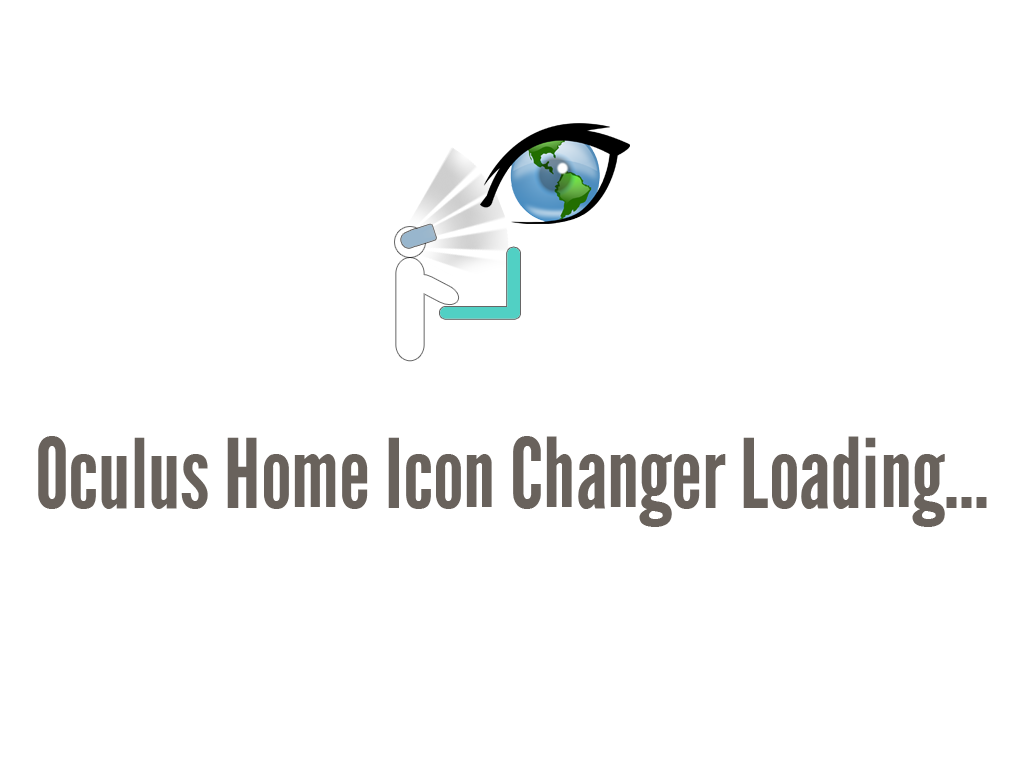
<style>
.page{position:relative;width:1024px;height:768px;background:#ffffff}
.page>*{position:absolute;margin:0}
.t1{font:95.7px "LeagueGothic-Regular";color:#69625c}
</style>
<div class="page">
<p class="t1" style="left:38px;top:436px;width:949px;height:91px">Oculus Home Icon Changer Loading...</p>
</div>
